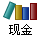
<style>
.page{position:relative;width:42px;height:36px;background:#ffffff}
.page>*{position:absolute;margin:0}
.t1{font:12px "SimSun";letter-spacing:0.02em;color:#000000}
</style>
<div class="page">
<p class="t1" style="left:9px;top:24px;width:23px;height:11px">现金</p>
</div>
